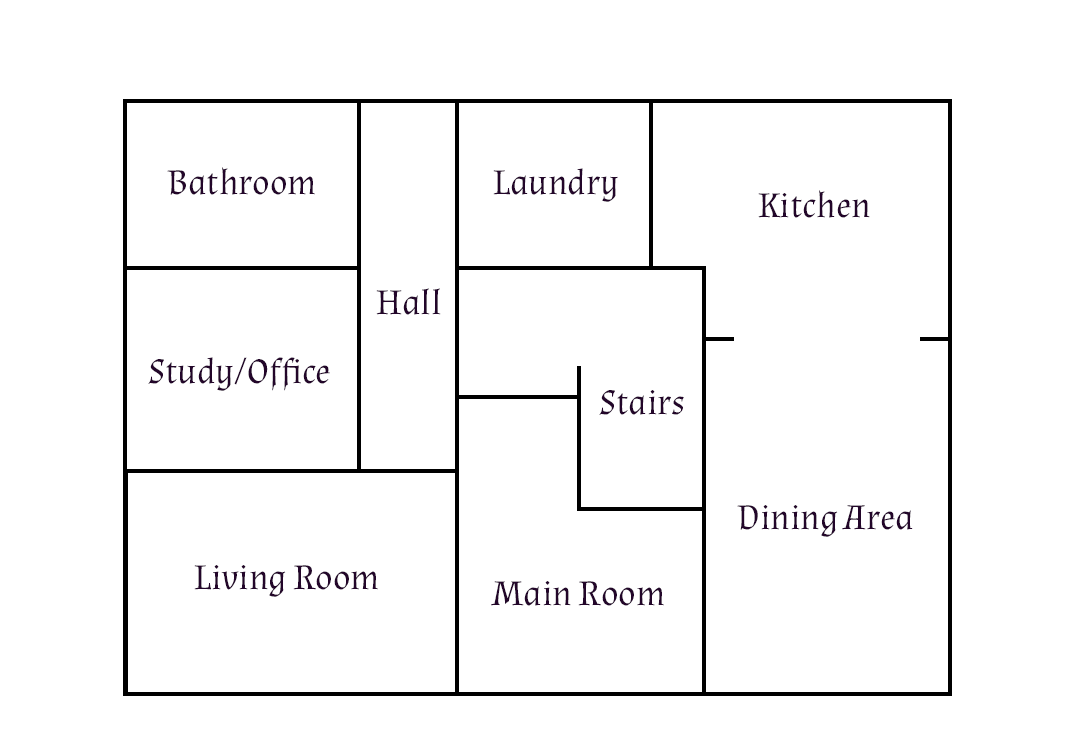
<style>
.page{position:relative;width:1080px;height:756px;background:#ffffff}
.page>*{position:absolute;margin:0}
.t1{font:36px "Almendra-Regular";color:#23062a}
</style>
<div class="page">
<p class="t1" style="left:167px;top:167px;width:148px;height:28px">Bathroom</p>
<p class="t1" style="left:493px;top:168px;width:125px;height:34px">Laundry</p>
<p class="t1" style="left:758px;top:190px;width:112px;height:28px">Kitchen</p>
<p class="t1" style="left:376px;top:288px;width:65px;height:27px">Hall</p>
<p class="t1" style="left:148px;top:357px;width:182px;height:34px">Study/Office</p>
<p class="t1" style="left:599px;top:390px;width:85px;height:25px">Stairs</p>
<p class="t1" style="left:737px;top:505px;width:176px;height:32px">Dining Area</p>
<p class="t1" style="left:194px;top:565px;width:184px;height:32px">Living Room</p>
<p class="t1" style="left:491px;top:581px;width:173px;height:25px">Main Room</p>
</div>
